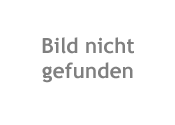
<style>
.page{position:relative;width:175px;height:125px;background:#ffffff}
.page>*{position:absolute;margin:0}
.t1{font:21px "TrebuchetMS-Bold";color:#7f7f7f}
</style>
<div class="page">
<p class="t1" style="left:42px;top:37px;width:92px;height:46px;text-align:center">Bild nicht gefunden</p>
</div>
